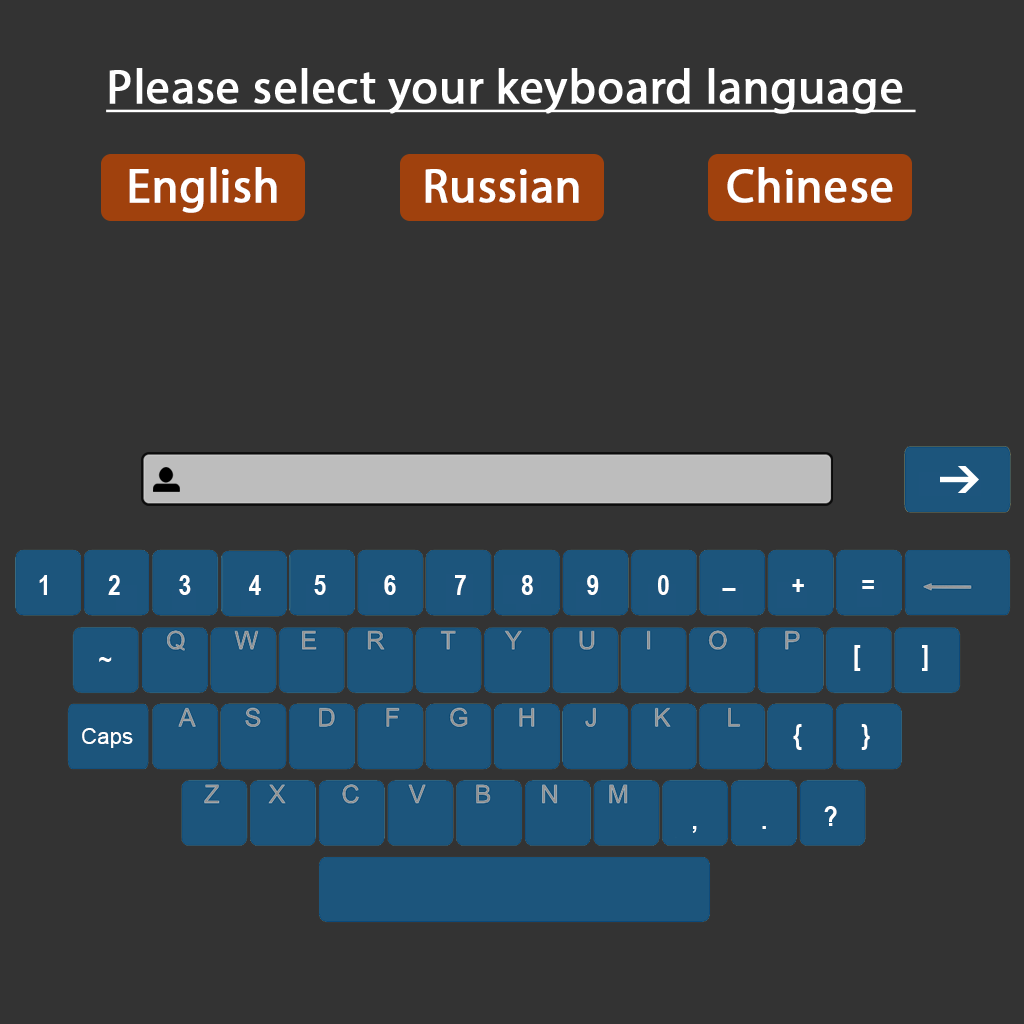
<style>
.page{position:relative;width:1024px;height:1024px;background:#333333}
.page>*{position:absolute;margin:0}
.t1{font:48px "MyriadPro-Regular";color:#ffffff;font-weight:bold;text-decoration:underline}
.t2{font:48px "MyriadPro-Regular";color:#ffffff;font-weight:bold}
.t3{font:28.4px "ArialNarrow-Bold";color:#ffffff}
.t4{font:28.5px "ArialNarrow-Bold";color:#ffffff;scale:2.03 1}
.t5{font:22px "ArialMT";color:#ffffff}
</style>
<div class="page">
<p class="t1" style="left:106px;top:68px;width:810px;height:46px">Please select your keyboard language</p>
<p class="t2" style="left:129px;top:167px;width:148px;height:46px">English</p>
<p class="t2" style="left:425px;top:169px;width:154px;height:34px">Russian</p>
<p class="t2" style="left:727px;top:167px;width:166px;height:36px">Chinese</p>
<p class="t3" style="left:39px;top:575px;width:8px;height:20px">1</p>
<p class="t3" style="left:108px;top:575px;width:12px;height:20px">2</p>
<p class="t3" style="left:179px;top:575px;width:12px;height:20px">3</p>
<p class="t3" style="left:249px;top:575px;width:12px;height:20px">4</p>
<p class="t3" style="left:314px;top:575px;width:12px;height:20px">5</p>
<p class="t3" style="left:384px;top:575px;width:12px;height:20px">6</p>
<p class="t3" style="left:455px;top:575px;width:11px;height:20px">7</p>
<p class="t3" style="left:521px;top:575px;width:12px;height:20px">8</p>
<p class="t3" style="left:587px;top:575px;width:12px;height:20px">9</p>
<p class="t3" style="left:658px;top:575px;width:11px;height:20px">0</p>
<p class="t3" style="left:792px;top:579px;width:12px;height:13px">+</p>
<p class="t3" style="left:862px;top:580px;width:12px;height:9px">=</p>
<p class="t4" style="left:722px;top:588px;width:14px;height:3px">-</p>
<p class="t3" style="left:854px;top:645px;width:7px;height:26px">[</p>
<p class="t3" style="left:922px;top:645px;width:6px;height:26px">]</p>
<p class="t3" style="left:99px;top:657px;width:13px;height:5px">~</p>
<p class="t3" style="left:793px;top:724px;width:9px;height:26px">{</p>
<p class="t3" style="left:861px;top:724px;width:9px;height:26px">}</p>
<p class="t5" style="left:82px;top:728px;width:51px;height:20px">Caps</p>
<p class="t3" style="left:824px;top:806px;width:13px;height:20px">?</p>
<p class="t3" style="left:692px;top:826px;width:5px;height:7px">,</p>
<p class="t3" style="left:762px;top:826px;width:4px;height:3px">.</p>
</div>
